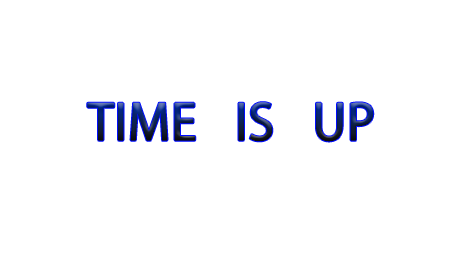
<style>
.page{position:relative;width:454px;height:255px;background:#ffffff}
.page>*{position:absolute;margin:0}
.t1{font:48px "KozGoPr6N-Regular";font-weight:bold}
</style>
<div class="page">
<p class="t1" style="left:87px;top:102px;width:287px;height:40px">TIME   IS   UP</p>
</div>
